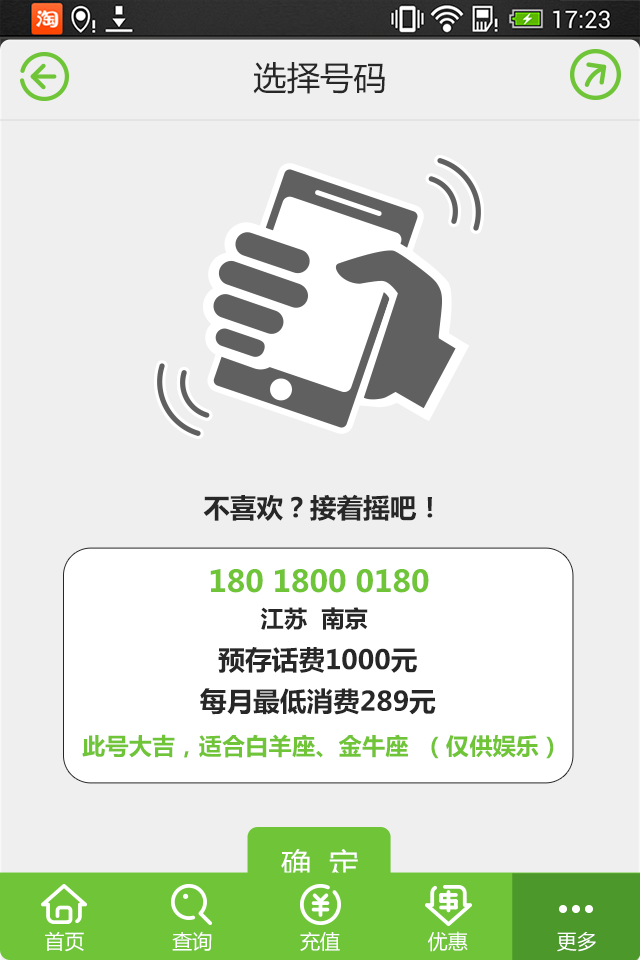
<style>
.page{position:relative;width:640px;height:960px;background:#efefef}
.page>*{position:absolute;margin:0}
.t1{font:33.3px "MicrosoftYaHei";color:#272727}
.t2{font:26.7px "MicrosoftYaHei-Bold";color:#272727}
.t3{font:30px "MicrosoftYaHei-Bold";color:#6fc537}
.t4{font:23.3px "MicrosoftYaHei-Bold";color:#272727}
.t5{font:26.7px/41.5px "MicrosoftYaHei-Bold";color:#272727}
.t6{font:23.3px "MicrosoftYaHei-Bold";color:#6fc537}
.t7{font:30px "MicrosoftYaHei";color:#ffffff}
.t8{font:20px "MicrosoftYaHei";color:#ffffff}
</style>
<div class="page">
<p class="t1" style="left:253px;top:62px;width:132px;height:32px">选择号码</p>
<p class="t2" style="left:203px;top:494px;width:230px;height:27px">不喜欢？接着摇吧！</p>
<p class="t3" style="left:210px;top:569px;width:219px;height:24px">180 1800 0180</p>
<p class="t4" style="left:260px;top:607px;width:108px;height:23px">江苏  南京</p>
<p class="t5" style="left:200px;top:647px;width:236px;height:68px;text-align:center">预存话费1000元<br>每月最低消费289元</p>
<p class="t6" style="left:82px;top:734px;width:472px;height:25px">此号大吉，适合白羊座、金牛座  （仅供娱乐）</p>
<p class="t7" style="left:281px;top:849px;width:78px;height:29px">确  定</p>
<p class="t8" style="left:45px;top:931px;width:39px;height:21px">首页</p>
<p class="t8" style="left:172px;top:931px;width:40px;height:20px">查询</p>
<p class="t8" style="left:300px;top:931px;width:40px;height:20px">充值</p>
<p class="t8" style="left:428px;top:931px;width:40px;height:21px">优惠</p>
<p class="t8" style="left:557px;top:932px;width:39px;height:20px">更多</p>
</div>
